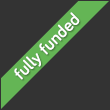
<style>
.page{position:relative;width:110px;height:110px;background:#333333}
.page>*{position:absolute;margin:0}
.t1{font:18px "Bariol-Bold";color:#ffffff}
</style>
<div class="page">
<p class="t1" style="left:14px;top:12px;width:66px;height:68px;text-align:center">fully funded</p>
</div>
